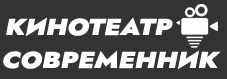
<style>
.page{position:relative;width:227px;height:79px;background:#333333}
.page>*{position:absolute;margin:0}
.t1{font:23px/33px "JostItalic-BlackItalic";color:#ffffff;font-style:italic;scale:1.15 1}
.t2{font:22px "JostItalic-BlackItalic";letter-spacing:0.12em;color:#ffffff;font-style:italic;scale:1.2 1}
</style>
<div class="page">
<p class="t1" style="left:3px;top:17px;width:218px;height:53px"><span class="t2"> </span>КИНОТЕАТР<br> СОВРЕМЕННИК</p>
</div>
